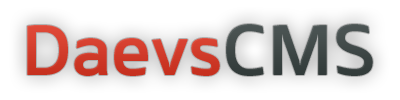
<style>
.page{position:relative;width:400px;height:100px;background:#ffffff}
.page>*{position:absolute;margin:0}
.t1{font:72px "Mentone-SemiBold";color:#dc3522}
.t2{font:72px "Mentone-SemiBold";color:#374140}
</style>
<div class="page">
<p class="t1" style="left:27px;top:24px;width:346px;height:52px">Daevs<span class="t2">CMS</span></p>
</div>
